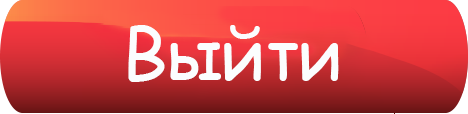
<style>
.page{position:relative;width:468px;height:114px}
.page>*{position:absolute;margin:0}
.t1{font:72px "ComicSansMS";letter-spacing:-0.02em;color:#fbfdfe}
</style>
<div class="page">
<p class="t1" style="left:128px;top:25px;width:211px;height:57px">Выйти</p>
</div>
